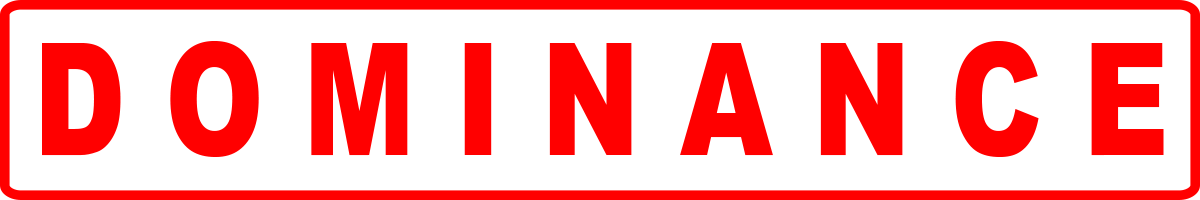
<style>
.page{position:relative;width:1200px;height:200px;background:#ffffff}
.page>*{position:absolute;margin:0}
.t1{font:155.6px "Arial-Black";color:#ff0000;scale:0.76 1}
</style>
<div class="page">
<p class="t1" style="left:42px;top:41px;width:1122px;height:116px">D O M I N A N C E</p>
</div>
